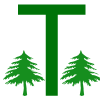
<style>
.page{position:relative;width:100px;height:100px;background:#ffffff}
.page>*{position:absolute;margin:0}
.t1{font:134.5px "MyriadPro-Regular";color:#007308}
</style>
<div class="page">
<p class="t1" style="left:18px;top:4px;width:68px;height:92px">T</p>
</div>
